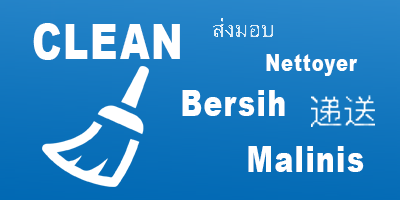
<style>
.page{position:relative;width:400px;height:200px}
.page>*{position:absolute;margin:0}
.t1{font:49.4px "Arial-Black";letter-spacing:0.05em;color:#ffffff;scale:0.77 1}
.t2{font:23.4px "Arial-Black";letter-spacing:0.05em;color:#ffffff;scale:0.77 1}
.t3{font:36.4px "Arial-Black";letter-spacing:0.05em;color:#ffffff;scale:0.77 1}
</style>
<div class="page">
<p class="t1" style="left:33px;top:23px;width:147px;height:37px">CLEAN</p>
<p class="t2" style="left:266px;top:54px;width:92px;height:22px">Nettoyer</p>
<p class="t3" style="left:182px;top:90px;width:103px;height:26px">Bersih</p>
<p class="t3" style="left:248px;top:146px;width:116px;height:26px">Malinis</p>
</div>
